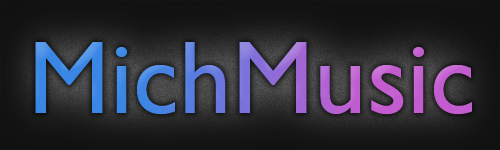
<style>
.page{position:relative;width:500px;height:150px}
.page>*{position:absolute;margin:0}
.t1{font:103.7px "GillSans"}
</style>
<div class="page">
<p class="t1" style="left:35px;top:42px;width:437px;height:73px">MichMusic</p>
</div>
